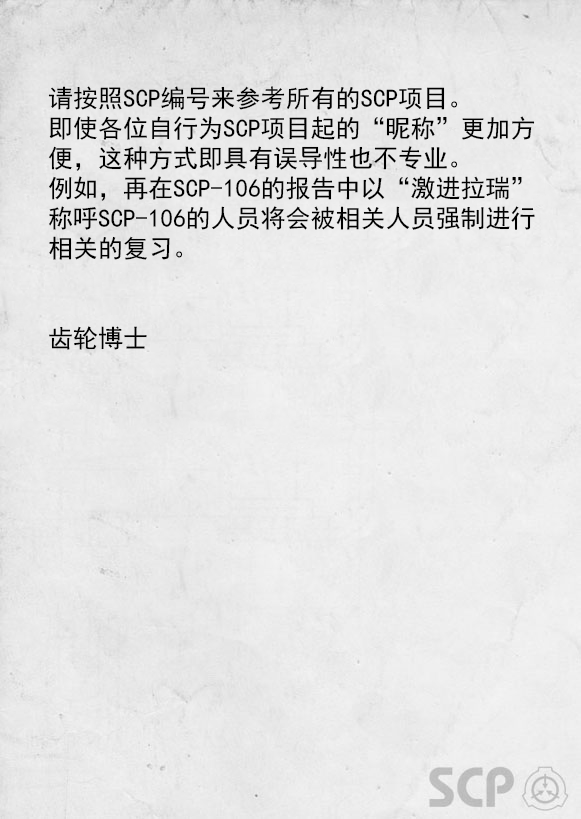
<style>
.page{position:relative;width:581px;height:819px}
.page>*{position:absolute;margin:0}
.t1{font:25px/30px "SimHei";color:#000000}
</style>
<div class="page">
<p class="t1" style="left:48px;top:86px;width:487px;height:264px">请按照SCP编号来参考所有的SCP项目。<br>即使各位自行为SCP项目起的“昵称”更加方<br>便，这种方式即具有误导性也不专业。<br>例如，再在SCP-106的报告中以“激进拉瑞”<br>称呼SCP-106的人员将会被相关人员强制进行<br>相关的复习。<br><br><br>齿轮博士</p>
</div>
